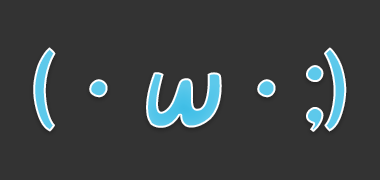
<style>
.page{position:relative;width:380px;height:180px;background:#333333}
.page>*{position:absolute;margin:0}
.t1{font:100px "KFhimaji";letter-spacing:-0.16em}
</style>
<div class="page">
<p class="t1" style="left:33px;top:47px;width:314px;height:85px">(・ω・;)</p>
</div>
